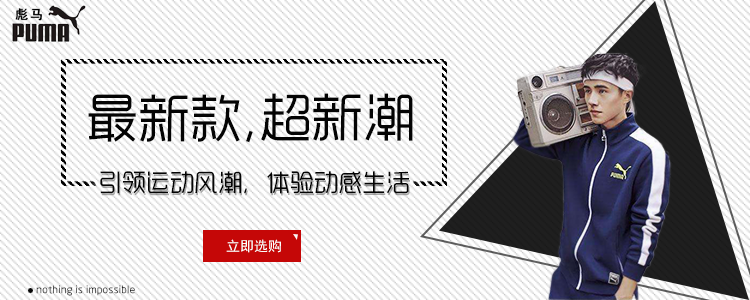
<style>
.page{position:relative;width:750px;height:300px;background:#ffffff}
.page>*{position:absolute;margin:0}
.t1{font:52px "RTWSYueGoTrial-Regular";color:#040404}
.t2{font:24px "RTWSYueGoTrial-Regular";color:#040404}
.t3{font:14px "SimHei";color:#fefefc}
.t4{font:11px "RTWSYueGoTrial-Regular"}
</style>
<div class="page">
<p class="t1" style="left:88px;top:94px;width:165px;height:49px">最新款，</p>
<p class="t1" style="left:261px;top:93px;width:152px;height:48px">超新潮</p>
<p class="t2" style="left:100px;top:171px;width:309px;height:23px">引领运动风潮，体验动感生活</p>
<p class="t3" style="left:226px;top:239px;width:55px;height:14px">立即选购</p>
<p class="t4" style="left:36px;top:285px;width:99px;height:11px">nothing is impossible</p>
</div>
